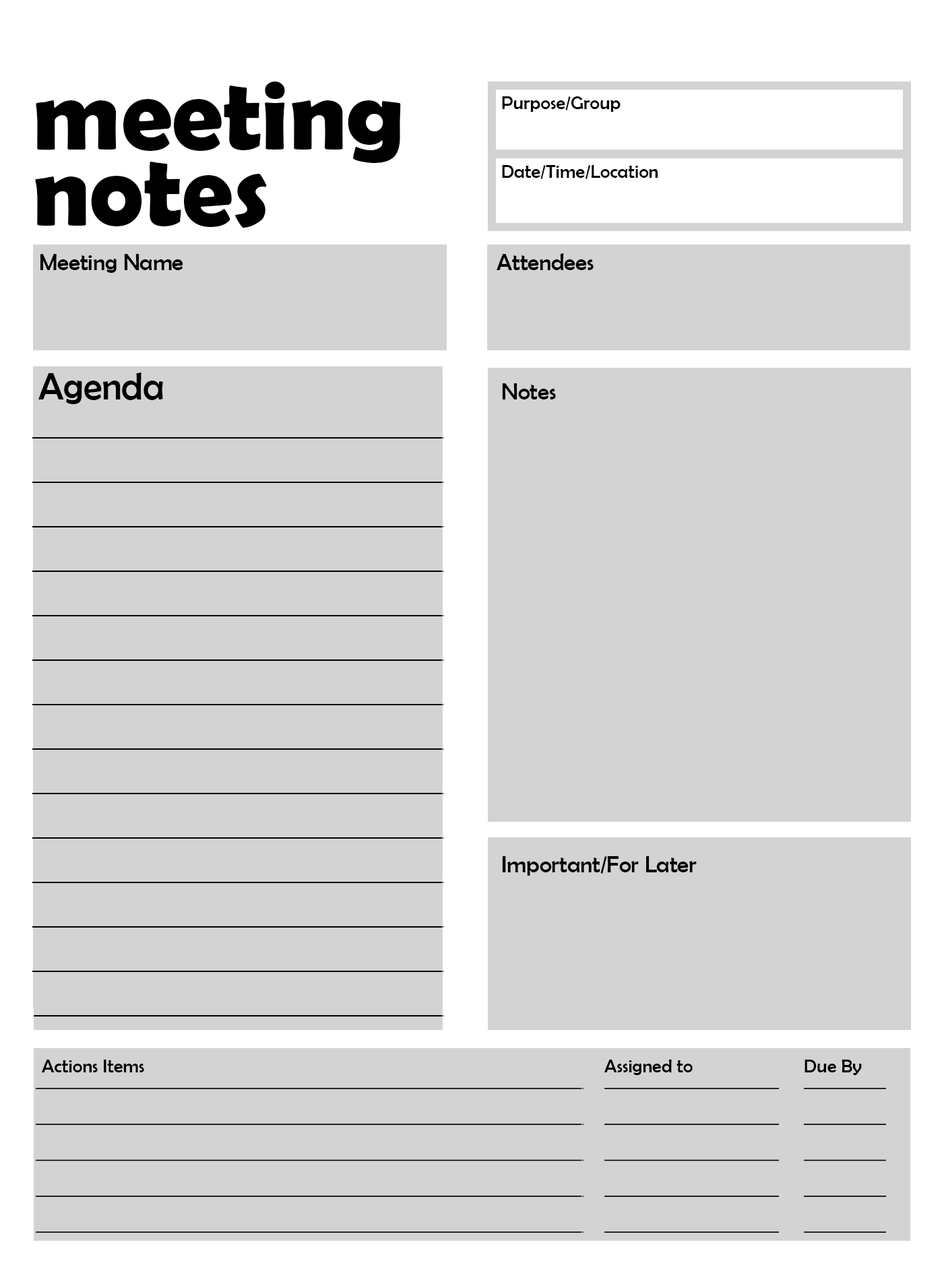
<style>
.page{position:relative;width:946px;height:1261px;background:#d3d3d3}
.page>*{position:absolute;margin:0}
.t1{font:101.5px/76.1px "BerlinSansFBDemi-Bold";color:#000000}
.t2{font:19px "BerlinSansFB-Reg";color:#000000}
.t3{font:23.3px "BerlinSansFB-Reg";color:#000000}
.t4{font:38.1px "BerlinSansFB-Reg";color:#000000}
</style>
<div class="page">
<p class="t1" style="left:35px;top:82px;width:366px;height:146px">meeting<br>notes</p>
<p class="t2" style="left:502px;top:96px;width:118px;height:16px">Purpose/Group</p>
<p class="t2" style="left:502px;top:165px;width:155px;height:14px">Date/Time/Location</p>
<p class="t3" style="left:40px;top:254px;width:143px;height:19px">Meeting Name</p>
<p class="t3" style="left:496px;top:253px;width:97px;height:17px">Attendees</p>
<p class="t4" style="left:38px;top:372px;width:125px;height:32px">Agenda</p>
<p class="t3" style="left:502px;top:383px;width:54px;height:16px">Notes</p>
<p class="t3" style="left:502px;top:856px;width:194px;height:20px">Important/For Later</p>
<p class="t2" style="left:42px;top:1060px;width:102px;height:12px">Actions Items</p>
<p class="t2" style="left:604px;top:1060px;width:88px;height:15px">Assigned to</p>
<p class="t2" style="left:804px;top:1060px;width:57px;height:15px">Due By</p>
</div>
